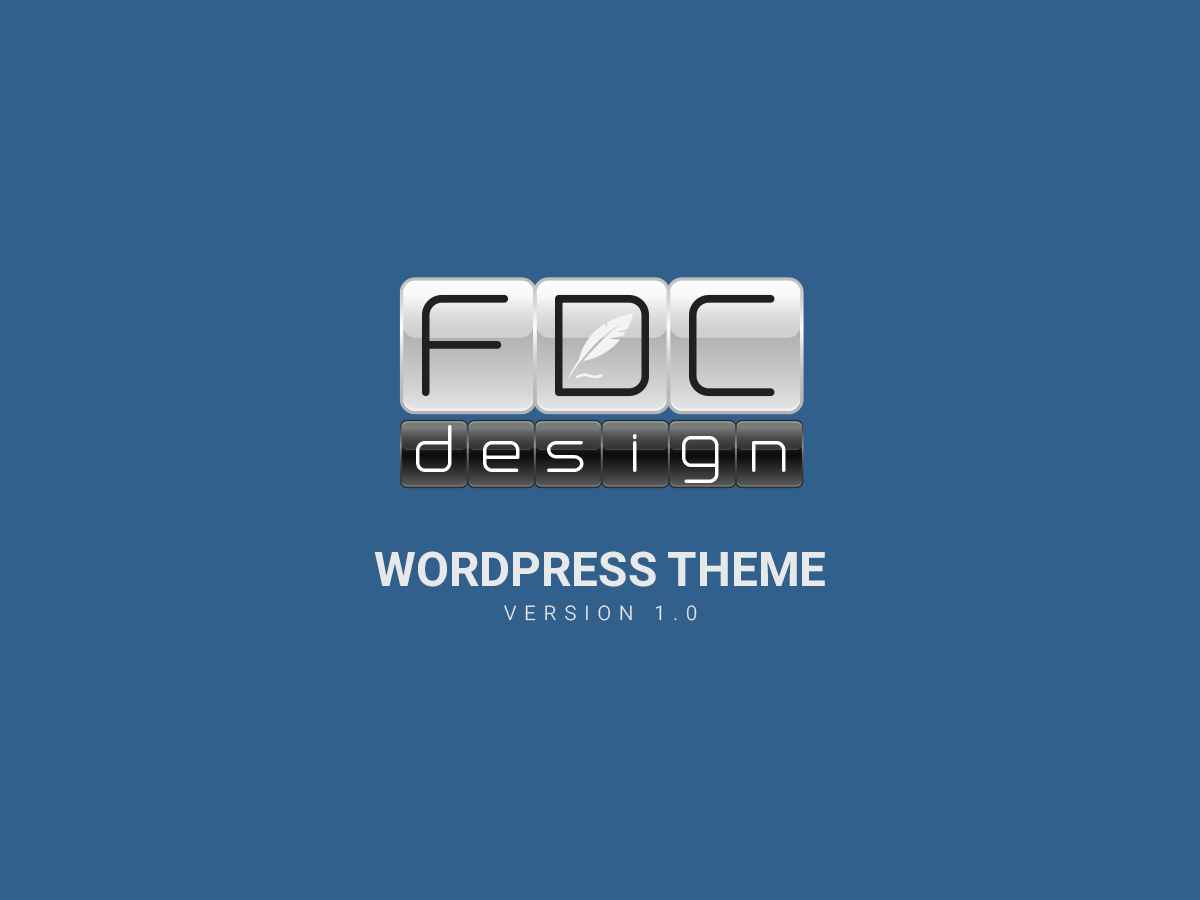
<style>
.page{position:relative;width:1200px;height:900px;background:#32608c}
.page>*{position:absolute;margin:0}
.t1{font:47.7px "Roboto-Bold";color:#e7e8e9}
.t2{font:20px "Roboto-Light";letter-spacing:0.4em;color:#e7e8e9;text-transform:uppercase}
</style>
<div class="page">
<p class="t1" style="left:374px;top:551px;width:451px;height:36px">WORDPRESS THEME</p>
<p class="t2" style="left:504px;top:605px;width:193px;height:16px">version 1.0</p>
</div>
